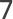
<style>
.page{position:relative;width:13px;height:19px;background:#ffffff}
.page>*{position:absolute;margin:0}
.t1{font:30px "Calibri";color:#3c3c3c}
</style>
<div class="page">
<p class="t1" style="left:0px;top:0px;width:13px;height:19px">7</p>
</div>
